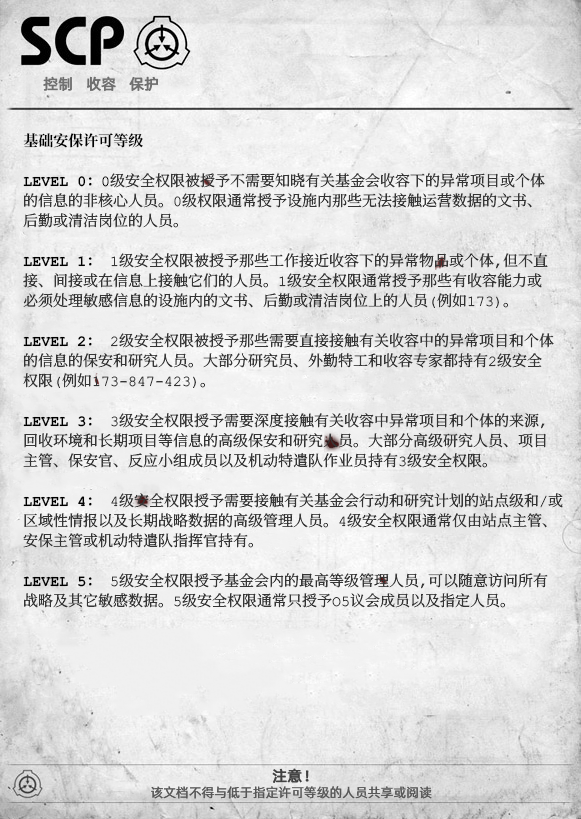
<style>
.page{position:relative;width:581px;height:819px}
.page>*{position:absolute;margin:0}
.t1{font:15px "AlibabaPuHuiTiR";color:#707070;font-weight:bold}
.t2{font:15px/20px "ContainmentBreach-Regular";color:#353535}
.t3{font:15px/20px "ContainmentBreach-Bold";color:#000000}
.t4{font:15px/20px "ContainmentBreach-Regular";color:#000000}
.t5{font:15px "AlibabaPuHuiTiR";color:#414141;font-weight:bold}
.t6{font:13px "AlibabaPuHuiTiR";color:#575757}
</style>
<div class="page">
<p class="t1" style="left:43px;top:76px;width:115px;height:15px">控制   收容   保护</p>
<p class="t2" style="left:23px;top:133px;width:540px;height:475px"><span class="t3">基础安保许可等级<br><br>LEVEL 0：</span><span class="t4">0</span>级安全权限被授予不需要知晓有关基金会收容下的异常项目或个体<br>的信息的非核心人员。0级权限通常授予设施内那些无法接触运营数据的文书、<br>后勤或清洁岗位的人员。<br><br><span class="t3">LEVEL 1：</span> 1级安全权限被授予那些工作接近收容下的异常物品或个体，但不直<br>接、间接或在信息上接触它们的人员。1级安全权限通常授予那些有收容能力或<br>必须处理敏感信息的设施内的文书、后勤或清洁岗位上的人员（例如173）。<br><br><span class="t3">LEVEL 2：</span> 2级安全权限被授予那些需要直接接触有关收容中的异常项目和个体<br>的信息的保安和研究人员。大部分研究员、外勤特工和收容专家都持有2级安全<br>权限（例如173-847-423）。<br><br><span class="t3">LEVEL 3：</span> 3级安全权限授予需要深度接触有关收容中异常项目和个体的来源，<br>回收环境和长期项目等信息的高级保安和研究人员。大部分高级研究人员、项目<br>主管、保安官、反应小组成员以及机动特遣队作业员持有3级安全权限。<br><br><span class="t3">LEVEL 4：</span> 4级安全权限授予需要接触有关基金会行动和研究计划的站点级和/或<br>区域性情报以及长期战略数据的高级管理人员。4级安全权限通常仅由站点主管、<br>安保主管或机动特遣队指挥官持有。<br><br><span class="t3">LEVEL 5：</span> 5级安全权限授予基金会内的最高等级管理人员，可以随意访问所有<br>战略及其它敏感数据。5级安全权限通常只授予O5议会成员以及指定人员。</p>
<p class="t5" style="left:272px;top:768px;width:37px;height:15px">注意！</p>
<p class="t6" style="left:151px;top:786px;width:281px;height:13px">该文档不得与低于指定许可等级的人员共享或阅读</p>
</div>
